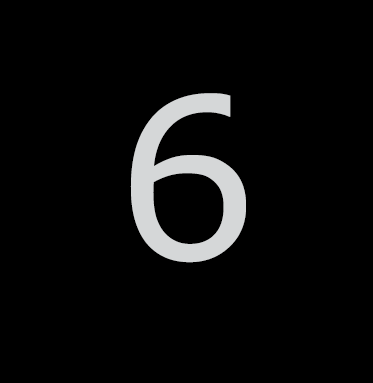
<style>
.page{position:relative;width:373px;height:383px;background:#000000}
.page>*{position:absolute;margin:0}
.t1{font:223.1px "Verdana";color:#d5d7d8}
</style>
<div class="page">
<p class="t1" style="left:130px;top:93px;width:116px;height:170px">6</p>
</div>
